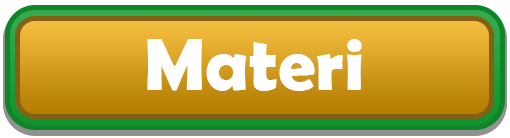
<style>
.page{position:relative;width:510px;height:138px}
.page>*{position:absolute;margin:0}
.t1{font:75px "BerlinSansFBDemi-Bold";color:#ffffff}
</style>
<div class="page">
<p class="t1" style="left:147px;top:39px;width:215px;height:52px">Materi</p>
</div>
